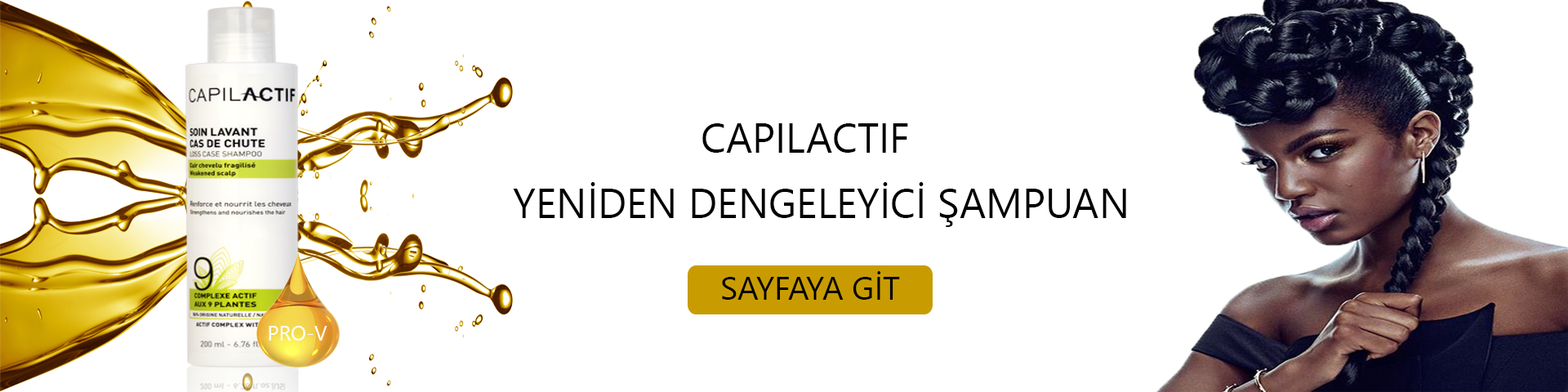
<style>
.page{position:relative;width:1568px;height:392px;background:#ffffff}
.page>*{position:absolute;margin:0}
.t1{font:40.8px "SegoeUI";color:#000000}
.t2{font:32.7px "SegoeUI";color:#000000}
.t3{font:20.4px "SegoeUI";color:#ffffff}
</style>
<div class="page">
<p class="t1" style="left:702px;top:123px;width:206px;height:30px">CAPILACTIF</p>
<p class="t1" style="left:513px;top:182px;width:613px;height:45px">YENİDEN DENGELEYİCİ ŞAMPUAN</p>
<p class="t2" style="left:722px;top:271px;width:178px;height:29px">SAYFAYA GİT</p>
<p class="t3" style="left:269px;top:326px;width:58px;height:15px">PRO-V</p>
</div>
